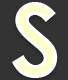
<style>
.page{position:relative;width:68px;height:80px;background:#333333}
.page>*{position:absolute;margin:0}
.t1{font:100px "CenturyGothic-Bold"}
</style>
<div class="page">
<p class="t1" style="left:12px;top:2px;width:46px;height:76px">S</p>
</div>
